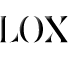
<style>
.page{position:relative;width:68px;height:60px;background:#ffffff}
.page>*{position:absolute;margin:0}
.t1{font:33px "DpQuake";color:#000000;scale:0.86 1}
</style>
<div class="page">
<p class="t1" style="left:0px;top:16px;width:68px;height:27px">LOX</p>
</div>
